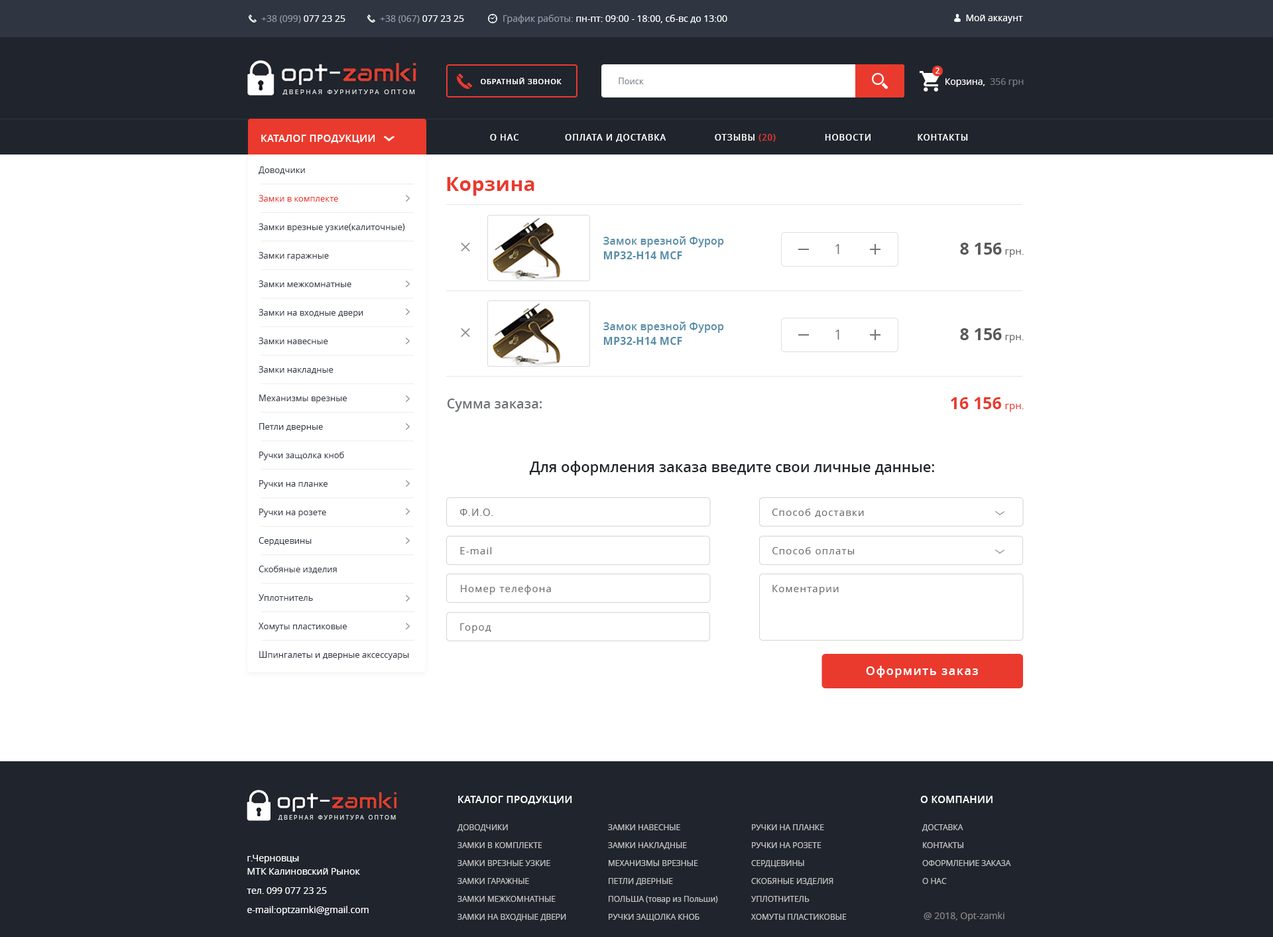
<style>
.page{position:relative;width:1273px;height:937px;background:#ffffff}
.page>*{position:absolute;margin:0}
.t1{font:9.3px "OpenSans";color:#9099a7}
.t2{font:9.3px "OpenSans";color:#ffffff}
.t3{font:7.3px "OpenSans-Semibold";letter-spacing:0.075em;color:#ffffff;text-transform:uppercase}
.t4{font:8.6px "OpenSans";color:#79818d}
.t5{font:8px "OpenSans-Semibold";color:#ffffff}
.t6{font:6.6px "OpenSans";letter-spacing:0.26em;color:#dfdfe0;text-transform:uppercase}
.t7{font:9.3px "OpenSans";color:#747b86}
.t8{font:9.9px "OpenSans-Semibold";letter-spacing:0.025em;color:#ffffff;text-transform:uppercase}
.t9{font:8.6px "OpenSans-Semibold";letter-spacing:0.07em;color:#ffffff;text-transform:uppercase}
.t10{font:8.6px "OpenSans-Semibold";letter-spacing:0.07em;color:#ea3a2d;text-transform:uppercase}
.t11{font:8.6px/28.5px "OpenSans";color:#373e4a}
.t12{font:8.6px/28.5px "OpenSans";color:#ea3a2d}
.t13{font:19.9px "OpenSans-Bold";letter-spacing:0.01em;color:#ea3a2d}
.t14{font:10.9px/14.9px "OpenSans-Semibold";color:#568da7}
.t15{font:10.9px/14.9px "OpenSans-Bold";color:#568da7}
.t16{font:13.1px "OpenSans";color:#757575}
.t17{font:16.6px "OpenSans-Bold";color:#59595a}
.t18{font:9.9px "OpenSans";color:#686869}
.t19{font:13.3px "OpenSans-Semibold";letter-spacing:0.002em;color:#6c7179}
.t20{font:16.6px "OpenSans-Bold";color:#ea3a2d}
.t21{font:9.9px "OpenSans";color:#ea3a2d}
.t22{font:14.6px "OpenSans-Semibold";color:#20252d}
.t23{font:9.9px "OpenSans";letter-spacing:0.075em;color:#6f6f6f}
.t24{font:11.9px "OpenSans-Semibold";letter-spacing:0.075em;color:#ffffff}
.t25{font:5.8px "OpenSans";letter-spacing:0.26em;color:#dfdfe0;text-transform:uppercase}
.t26{font:8px/17.9px "OpenSans";color:#c2c2c2}
.t27{font:8px/17.9px "OpenSans";color:#c2c2c2;text-transform:uppercase}
.t28{font:9.3px/19.2px "OpenSans";color:#ffffff}
.t29{font:9.3px/11.3px "OpenSans";color:#ffffff}
.t30{font:9.3px/13.3px "OpenSans";color:#ffffff}
.t31{font:9.3px "OpenSans";color:#888686}
</style>
<div class="page">
<p class="t1" style="left:261px;top:15px;width:84px;height:8px">+38 (099)<span class="t2"> 077 23 25</span></p>
<p class="t1" style="left:380px;top:15px;width:84px;height:8px">+38 (067)<span class="t2"> 077 23 25</span></p>
<p class="t2" style="left:503px;top:15px;width:224px;height:9px"><span class="t1">График работы: </span>пн-пт: 09:00 - 18:00, сб-вс до 13:00</p>
<p class="t2" style="left:966px;top:15px;width:57px;height:8px">Мой аккаунт</p>
<p class="t3" style="left:481px;top:78px;width:81px;height:6px">Обратный звонок</p>
<p class="t4" style="left:619px;top:78px;width:25px;height:6px">Поиск</p>
<p class="t5" style="left:935px;top:68px;width:5px;height:6px">2</p>
<p class="t6" style="left:282px;top:90px;width:133px;height:5px">Дверная фурнитура оптом</p>
<p class="t2" style="left:945px;top:78px;width:79px;height:9px">Корзина,  <span class="t7">356 грн</span></p>
<p class="t8" style="left:261px;top:135px;width:114px;height:8px">каталог продукции</p>
<p class="t9" style="left:490px;top:134px;width:478px;height:8px">о нас                оплата и доставка                 Отзывы <span class="t10">(20) </span>                НОВОСТИ                Контакты</p>
<p class="t11" style="left:259px;top:166px;width:150px;height:494px">Доводчики<br><span class="t12">Замки в комплекте<br></span>Замки врезные узкие(калиточные)<br>Замки гаражные<br>Замки межкомнатные<br>Замки на входные двери<br>Замки навесные<br>Замки накладные<br>Механизмы врезные<br>Петли дверные<br>Ручки защолка кноб<br>Ручки на планке<br>Ручки на розете<br>Сердцевины<br>Скобяные изделия<br>Уплотнитель<br>Хомуты пластиковые<br>Шпингалеты и дверные аксессуары</p>
<p class="t13" style="left:447px;top:177px;width:87px;height:19px">Корзина</p>
<p class="t14" style="left:603px;top:236px;width:121px;height:23px">Замок врезной Фурор<br><span class="t15">MP32-H14 MCF</span></p>
<p class="t16" style="left:835px;top:244px;width:4px;height:10px">1</p>
<p class="t17" style="left:960px;top:243px;width:42px;height:12px">8 156</p>
<p class="t18" style="left:1005px;top:249px;width:19px;height:8px">грн.</p>
<p class="t14" style="left:603px;top:322px;width:121px;height:23px">Замок врезной Фурор<br><span class="t15">MP32-H14 MCF</span></p>
<p class="t16" style="left:835px;top:329px;width:4px;height:10px">1</p>
<p class="t17" style="left:960px;top:328px;width:42px;height:12px">8 156</p>
<p class="t18" style="left:1005px;top:335px;width:19px;height:8px">грн.</p>
<p class="t19" style="left:448px;top:398px;width:94px;height:14px">Сумма заказа:</p>
<p class="t20" style="left:951px;top:397px;width:50px;height:12px">16 156</p>
<p class="t21" style="left:1005px;top:404px;width:19px;height:8px">грн.</p>
<p class="t22" style="left:529px;top:461px;width:405px;height:14px">Для оформления заказа введите свои личные данные:</p>
<p class="t23" style="left:459px;top:508px;width:34px;height:8px">Ф.И.О.</p>
<p class="t23" style="left:772px;top:508px;width:92px;height:9px">Способ доставки</p>
<p class="t23" style="left:460px;top:547px;width:32px;height:7px">E-mail</p>
<p class="t23" style="left:772px;top:547px;width:83px;height:7px">Способ оплаты</p>
<p class="t23" style="left:461px;top:585px;width:90px;height:10px">Номер телефона</p>
<p class="t23" style="left:772px;top:585px;width:67px;height:10px">Коментарии</p>
<p class="t23" style="left:460px;top:623px;width:31px;height:10px">Город</p>
<p class="t24" style="left:866px;top:666px;width:112px;height:12px">Оформить заказ</p>
<p class="t8" style="left:458px;top:796px;width:114px;height:8px">каталог продукции</p>
<p class="t8" style="left:920px;top:796px;width:72px;height:7px">о компании</p>
<p class="t25" style="left:278px;top:815px;width:118px;height:5px">Дверная фурнитура оптом</p>
<p class="t26" style="left:457px;top:824px;width:109px;height:97px">ДОВОДЧИКИ<br>ЗАМКИ В КОМПЛЕКТЕ<br>ЗАМКИ ВРЕЗНЫЕ УЗКИЕ<br>ЗАМКИ ГАРАЖНЫЕ<br>ЗАМКИ МЕЖКОМНАТНЫЕ<br>ЗАМКИ НА ВХОДНЫЕ ДВЕРИ</p>
<p class="t26" style="left:608px;top:824px;width:110px;height:97px">ЗАМКИ НАВЕСНЫЕ<br>ЗАМКИ НАКЛАДНЫЕ<br>МЕХАНИЗМЫ ВРЕЗНЫЕ<br>ПЕТЛИ ДВЕРНЫЕ<br>ПОЛЬША (товар из Польши)<br>РУЧКИ ЗАЩОЛКА КНОБ</p>
<p class="t26" style="left:751px;top:824px;width:96px;height:96px">РУЧКИ НА ПЛАНКЕ<br>РУЧКИ НА РОЗЕТЕ<br>СЕРДЦЕВИНЫ<br>СКОБЯНЫЕ ИЗДЕЛИЯ<br>УПЛОТНИТЕЛЬ<br>ХОМУТЫ ПЛАСТИКОВЫЕ</p>
<p class="t27" style="left:922px;top:824px;width:89px;height:60px">Доставка<br>Контакты <br>Оформление заказа<br>о нас</p>
<p class="t28" style="left:247px;top:855px;width:122px;height:60px">г.Черн<span class="t29">овцы</span><span class="t30"><br>МТК Калиновский Рынок<br></span>тел. 099 077 23 25<br>e-mail:optzamki@gmail.com</p>
<p class="t31" style="left:924px;top:912px;width:80px;height:9px">@ 2018, Opt-zamki</p>
</div>
